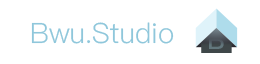
<style>
.page{position:relative;width:260px;height:64px;background:#ffffff}
.page>*{position:absolute;margin:0}
.t1{font:28px "PingFang-SC-Regular";color:#8fc7db}
</style>
<div class="page">
<p class="t1" style="left:31px;top:22px;width:143px;height:22px">Bwu.Studio</p>
</div>
